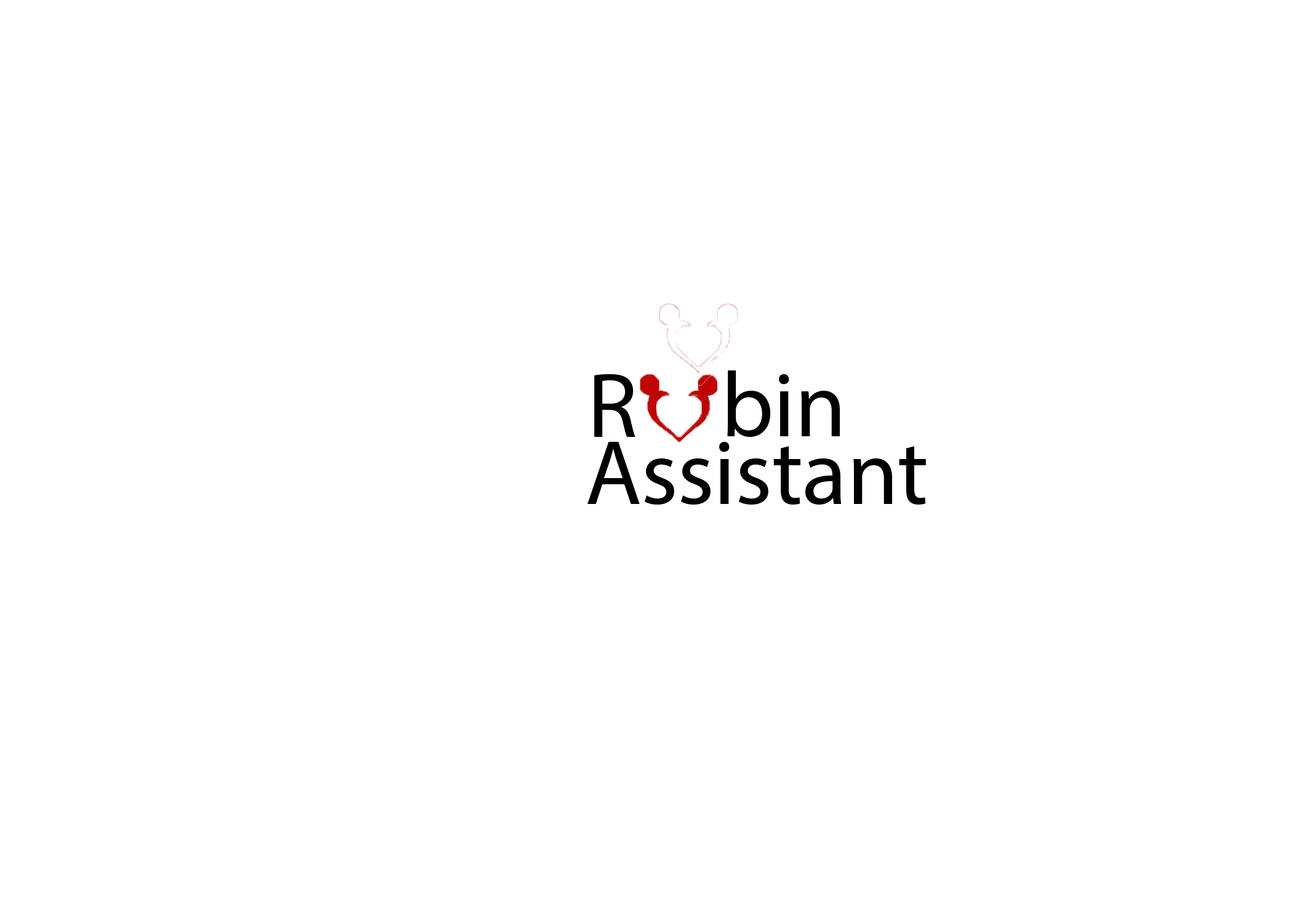
<style>
.page{position:relative;width:1292px;height:923px;background:#ffffff}
.page>*{position:absolute;margin:0}
.t1{font:92.3px "MyriadPro-Regular";color:#000000}
</style>
<div class="page">
<p class="t1" style="left:594px;top:374px;width:42px;height:63px">R</p>
<p class="t1" style="left:727px;top:370px;width:113px;height:67px">bin</p>
<p class="t1" style="left:588px;top:442px;width:338px;height:63px">Assistant</p>
</div>
